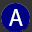
<style>
.page{position:relative;width:32px;height:32px;background:#000085}
.page>*{position:absolute;margin:0}
.t1{font:24px "MyriadPro-Regular";color:#ffffff}
</style>
<div class="page">
<p class="t1" style="left:9px;top:9px;width:14px;height:17px">A</p>
</div>
